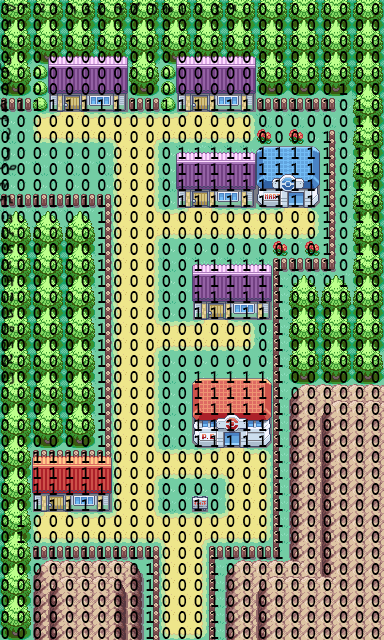
<style>
.page{position:relative;width:384px;height:640px}
.page>*{position:absolute;margin:0}
.t1{font:18.6px/16px "CourierNewPS-BoldMT";letter-spacing:0.35em;color:#000000;scale:0.91 1}
</style>
<div class="page">
<p class="t1" style="left:1px;top:3px;width:379px;height:636px">000000000000000000000000<br>000000000000000000000000<br>000000000000000000000000<br>000000000000000000000000<br>000000000000000000000000<br>000000000000000000000100<br>111111111111111111111010<br>000000000000000000000010<br>000000000000000000001010<br>000000000001111111111010<br>000000000001111111111010<br>000000000001111111111010<br>111111100001111111111010<br>000000100000000000001010<br>000000100000000000001010<br>000000100000000000001010<br>000000100000111111111010<br>000000100000111111000100<br>000000100000111111000000<br>000000100000111111000000<br>000000100000000001000000<br>000000100000000001000000<br>000000100000000001000000<br>000000100000111111000000<br>000000100000111111000000<br>000000100000111111000000<br>000000100000111111000000<br>000000100000111111000000<br>001111100000000001000000<br>001111100000000001000000<br>001111100000000001000000001111100000100001000000<br>010000000000000001000000<br>010000000000000001000000<br>001111111100011111000000<br>000000000100010000000000<br>000000000100010000000000<br>000000000100010000000000<br>000000000100010000000000<br>000000000100010000000000</p>
</div>
